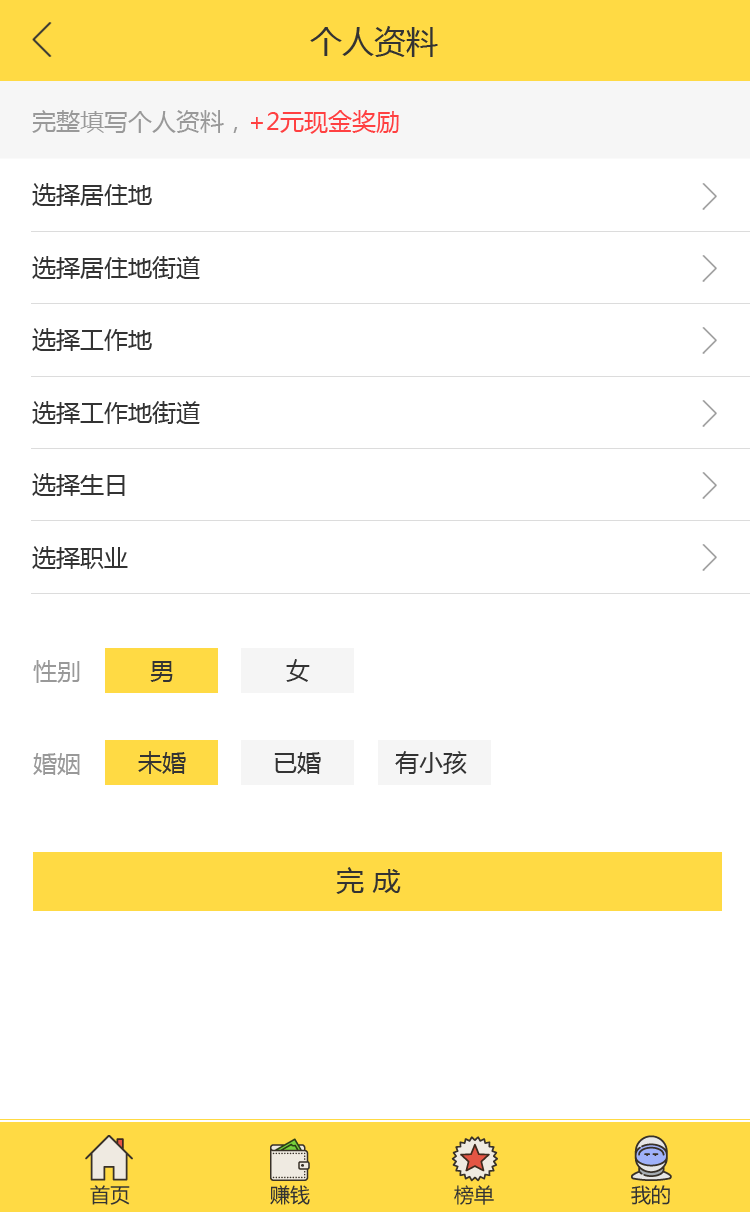
<style>
.page{position:relative;width:750px;height:1212px;background:#ffffff}
.page>*{position:absolute;margin:0}
.t1{font:32px "MicrosoftYaHei";color:#333333}
.t2{font:24px "MicrosoftYaHei";color:#999999}
.t3{font:24px "MicrosoftYaHei";color:#ff4041}
.t4{font:24px "MicrosoftYaHei";color:#333333}
.t5{font:28px "MicrosoftYaHei";color:#333333}
.t6{font:20px "MicrosoftYaHei";color:#333333}
</style>
<div class="page">
<p class="t1" style="left:310px;top:26px;width:128px;height:31px">个人资料</p>
<p class="t2" style="left:32px;top:110px;width:367px;height:24px">完整填写个人资料，<span class="t3">+2元现金奖励</span></p>
<p class="t4" style="left:32px;top:183px;width:120px;height:23px">选择居住地</p>
<p class="t4" style="left:32px;top:256px;width:168px;height:23px">选择居住地街道</p>
<p class="t4" style="left:32px;top:328px;width:120px;height:23px">选择工作地</p>
<p class="t4" style="left:32px;top:401px;width:168px;height:23px">选择工作地街道</p>
<p class="t4" style="left:32px;top:473px;width:93px;height:23px">选择生日</p>
<p class="t4" style="left:32px;top:546px;width:96px;height:23px">选择职业</p>
<p class="t2" style="left:33px;top:660px;width:47px;height:23px">性别</p>
<p class="t4" style="left:150px;top:661px;width:23px;height:21px">男</p>
<p class="t4" style="left:286px;top:659px;width:24px;height:23px">女</p>
<p class="t2" style="left:33px;top:753px;width:47px;height:22px">婚姻</p>
<p class="t4" style="left:138px;top:751px;width:48px;height:23px">未婚</p>
<p class="t4" style="left:274px;top:752px;width:47px;height:22px">已婚</p>
<p class="t4" style="left:395px;top:751px;width:72px;height:23px">有小孩</p>
<p class="t5" style="left:336px;top:867px;width:65px;height:27px">完 成</p>
<p class="t6" style="left:90px;top:1185px;width:40px;height:20px">首页</p>
<p class="t6" style="left:270px;top:1185px;width:40px;height:20px">赚钱</p>
<p class="t6" style="left:454px;top:1185px;width:40px;height:20px">榜单</p>
<p class="t6" style="left:631px;top:1185px;width:39px;height:20px">我的</p>
</div>
